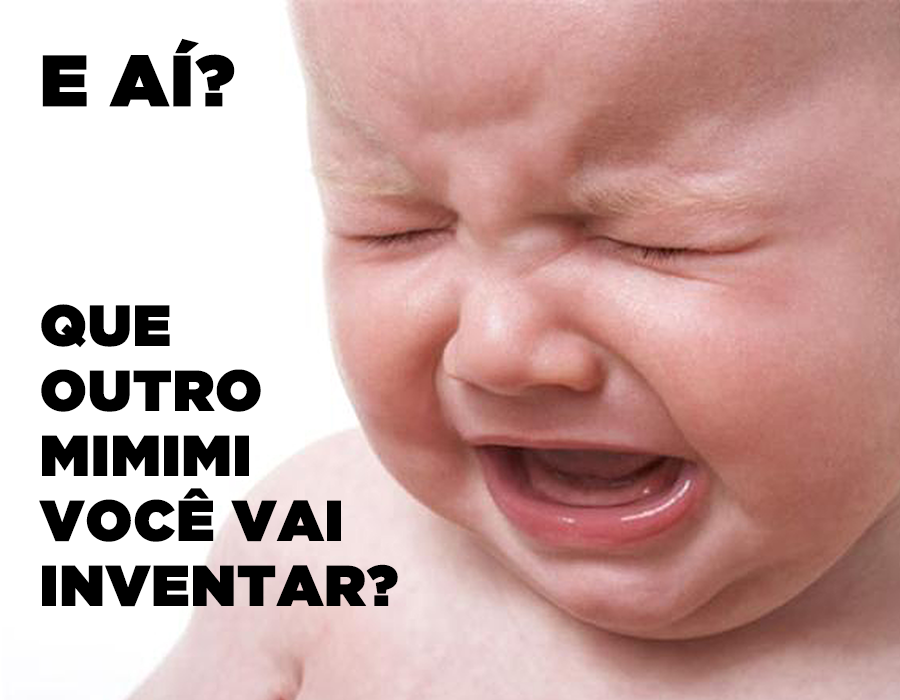
<style>
.page{position:relative;width:900px;height:700px;background:#ffffff}
.page>*{position:absolute;margin:0}
.t1{font:71.9px "GothamUltra";color:#000000;font-weight:bold}
.t2{font:57.2px/65px "GothamUltra";color:#000000;font-weight:bold}
</style>
<div class="page">
<p class="t1" style="left:42px;top:38px;width:193px;height:69px">E AÍ?</p>
<p class="t2" style="left:39px;top:304px;width:359px;height:303px">QUE <br>OUTRO<br>MIMIMI<br>VOCÊ VAI<br>INVENTAR?</p>
</div>
